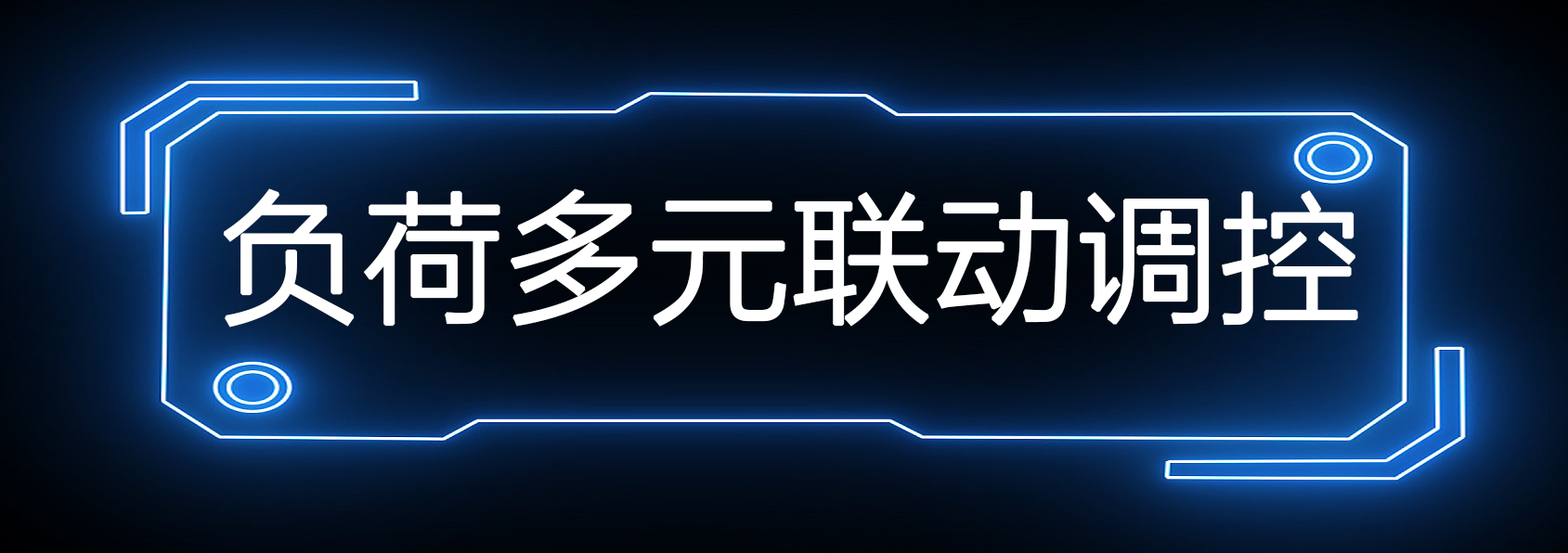
<style>
.page{position:relative;width:1568px;height:553px}
.page>*{position:absolute;margin:0}
.t1{font:139.3px "MicrosoftYaHeiLight";color:#ffffff;font-weight:bold}
</style>
<div class="page">
<p class="t1" style="left:223px;top:188px;width:1135px;height:140px">负荷多元联动调控</p>
</div>
